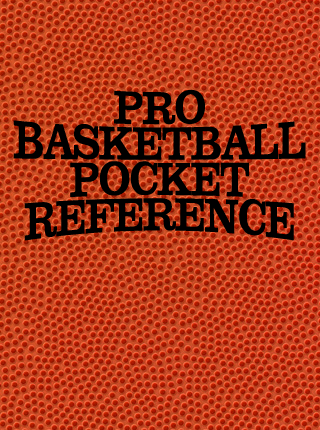
<style>
.page{position:relative;width:320px;height:430px}
.page>*{position:absolute;margin:0}
.t1{font:54px "Clarendon-Bold";color:#000000;scale:0.67 1}
</style>
<div class="page">
<p class="t1" style="left:13px;top:89px;width:293px;height:152px;text-align:center">PRO<br>BASKETBALL <br>POCKET<br>REFERENCE</p>
</div>
